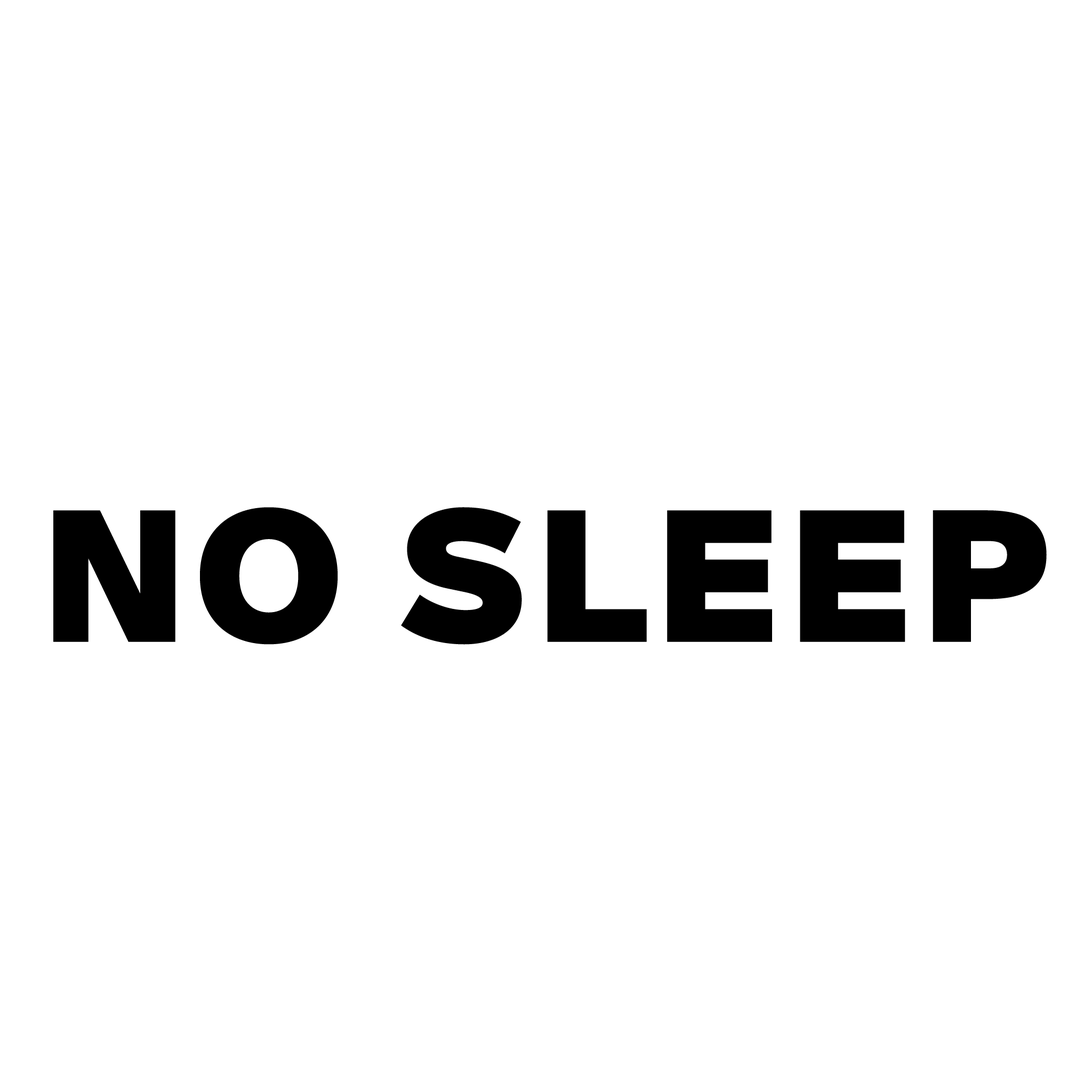
<style>
.page{position:relative;width:1092px;height:1092px;background:#ffffff}
.page>*{position:absolute;margin:0}
.t1{font:181.2px "SuisseIntl-Black";letter-spacing:0.05em;color:#000000}
</style>
<div class="page">
<p class="t1" style="left:53px;top:507px;width:994px;height:138px">NO SLEEP</p>
</div>
